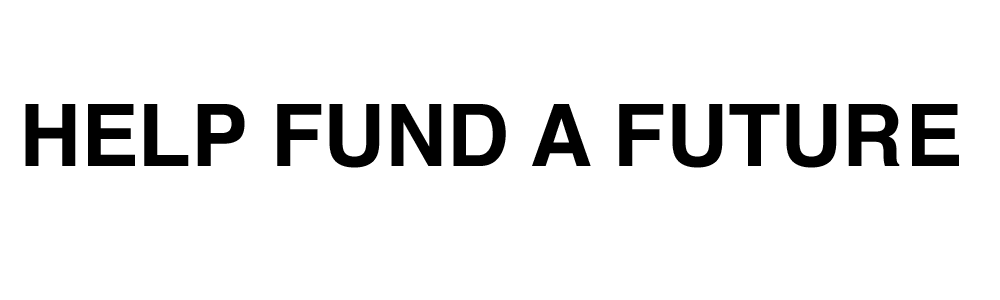
<style>
.page{position:relative;width:1000px;height:300px;background:#ffffff}
.page>*{position:absolute;margin:0}
.t1{font:86px "Helvetica-Bold";color:#000000}
</style>
<div class="page">
<p class="t1" style="left:25px;top:104px;width:934px;height:64px">HELP FUND A FUTURE</p>
</div>
